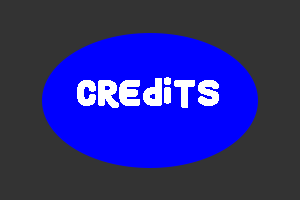
<style>
.page{position:relative;width:300px;height:200px;background:#333333}
.page>*{position:absolute;margin:0}
.t1{font:37.5px "RoundyRainbows";color:#ffffff}
</style>
<div class="page">
<p class="t1" style="left:77px;top:77px;width:142px;height:31px">Credits</p>
</div>
